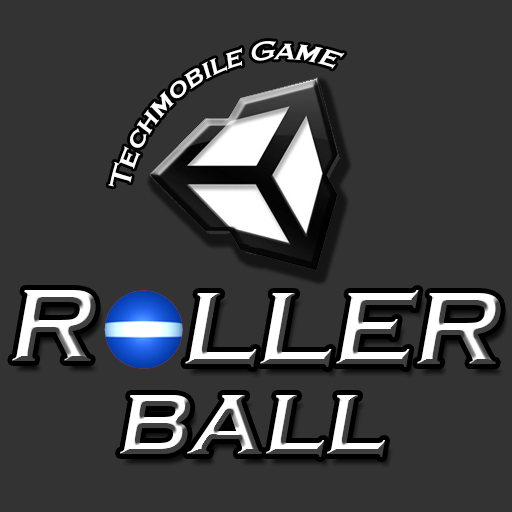
<style>
.page{position:relative;width:512px;height:512px;background:#333333}
.page>*{position:absolute;margin:0}
.t1{font:24px "CopperplateGothic-Bold";color:#ffffff;font-style:italic}
.t2{font:106.7px "CopperplateGothic-Bold";font-style:italic}
</style>
<div class="page">
<p class="t1" style="left:108px;top:41px;width:237px;height:146px;rotate:-30deg">Techmobile Game</p>
<p class="t2" style="left:12px;top:290px;width:84px;height:71px">R</p>
<p class="t2" style="left:185px;top:290px;width:316px;height:77px">LLER</p>
<p class="t2" style="left:120px;top:395px;width:266px;height:62px">ball</p>
</div>
